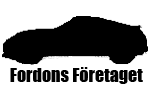
<style>
.page{position:relative;width:150px;height:100px;background:#ffffff}
.page>*{position:absolute;margin:0}
.t1{font:18px "Impact";color:#000000}
</style>
<div class="page">
<p class="t1" style="left:10px;top:67px;width:133px;height:17px">Fordons Företaget</p>
</div>
